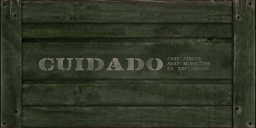
<style>
.page{position:relative;width:256px;height:128px}
.page>*{position:absolute;margin:0}
.t1{font:15.6px "Lintsec-Regular";letter-spacing:0.025em;color:#67675a;font-weight:bold;scale:1.22 1}
.t2{font:4.2px/5.1px "ArialMT";color:#646558;font-weight:bold;scale:1.11 1}
.t3{font:4.2px/5.3px "ArialMT";color:#646558;font-weight:bold;scale:1.11 1}
</style>
<div class="page">
<p class="t1" style="left:39px;top:58px;width:124px;height:13px">CUIDADO</p>
<p class="t2" style="left:167px;top:57px;width:43px;height:14px"><span class="t3">AK47   ARMAS<br></span>AK47   MUNIÇÕES<br>C4   EXPLOSIVOS</p>
</div>
